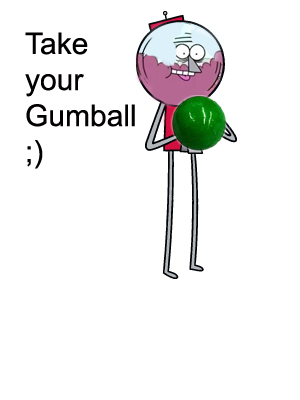
<style>
.page{position:relative;width:300px;height:400px;background:#ffffff}
.page>*{position:absolute;margin:0}
.t1{font:30px "ArialMT";color:#030001}
</style>
<div class="page">
<p class="t1" style="left:25px;top:32px;width:110px;height:137px">Take <br>your <br>Gumball <br>;)</p>
</div>
